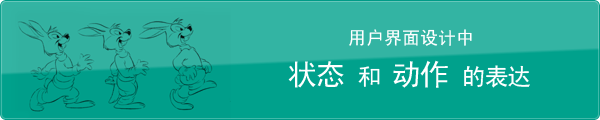
<style>
.page{position:relative;width:600px;height:120px;background:#33b4a3}
.page>*{position:absolute;margin:0}
.t1{font:18px "SimHei";color:#ffffff}
.t2{font:24px "SimHei";letter-spacing:-0.05em;color:#ffffff}
.t3{font:30px "SimHei";letter-spacing:-0.05em;color:#ffffff}
</style>
<div class="page">
<p class="t1" style="left:349px;top:29px;width:123px;height:17px">用户界面设计中</p>
<p class="t2" style="left:288px;top:60px;width:242px;height:28px"><span class="t3">状态 </span>和 <span class="t3">动作 </span>的表达</p>
</div>
